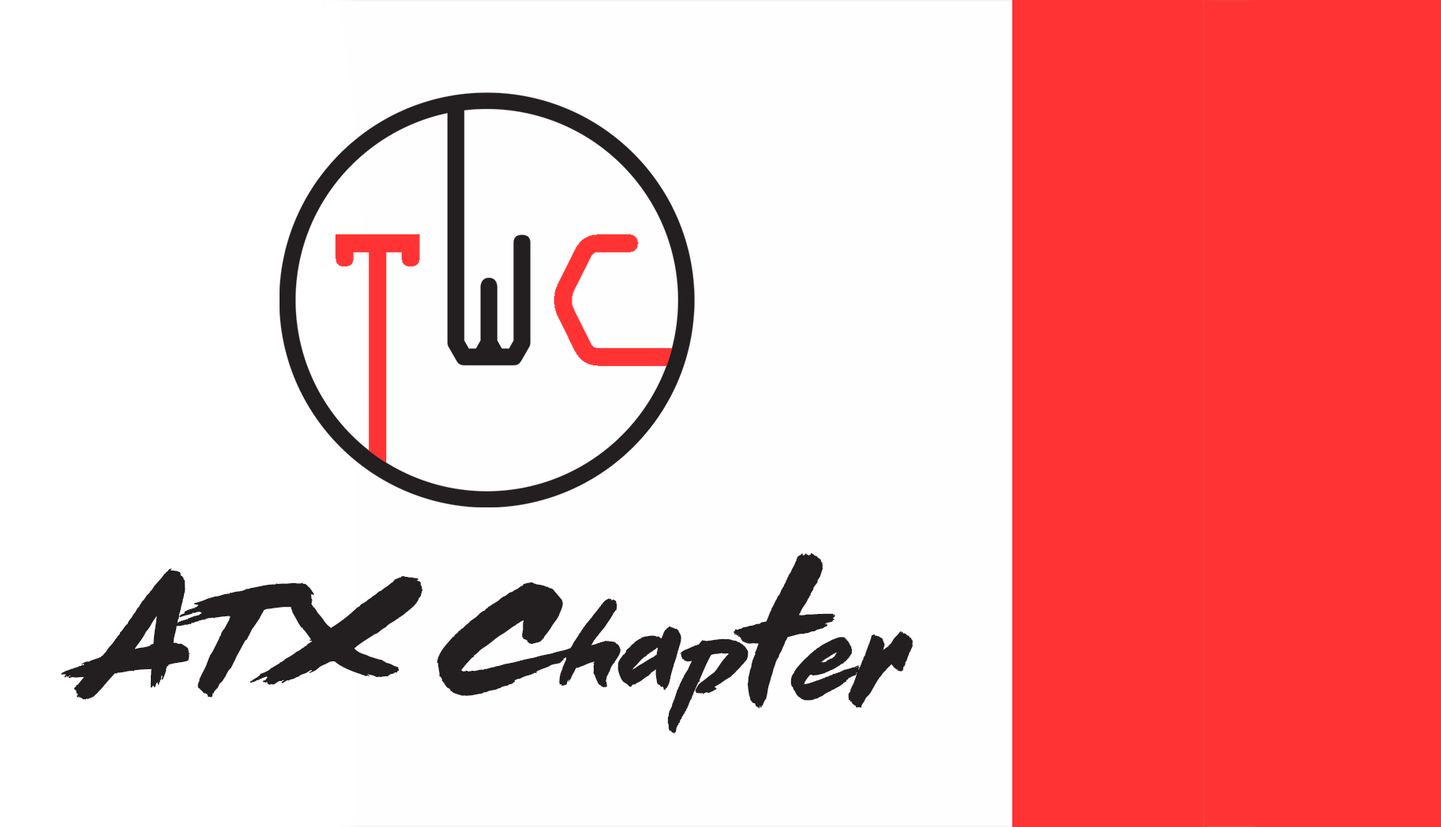
<style>
.page{position:relative;width:1441px;height:827px;background:#fefefe}
.page>*{position:absolute;margin:0}
.t1{font:152.4px "DeadStock";color:#231f20}
.t2{font:116.9px "DeadStock";color:#231f20}
.t3{font:126.3px "DeadStock";color:#231f20}
.t4{font:191.9px "DeadStock";letter-spacing:-0.12em;color:#231f20}
.t5{font:129.5px "DeadStock";color:#231f20}
.t6{font:146.1px "DeadStock";color:#231f20}
</style>
<div class="page">
<p class="t1" style="left:61px;top:554px;width:852px;height:180px">ATX C<span class="t2">ha</span><span class="t3">p</span><span class="t4">t</span><span class="t5">e</span><span class="t6">r</span></p>
</div>
